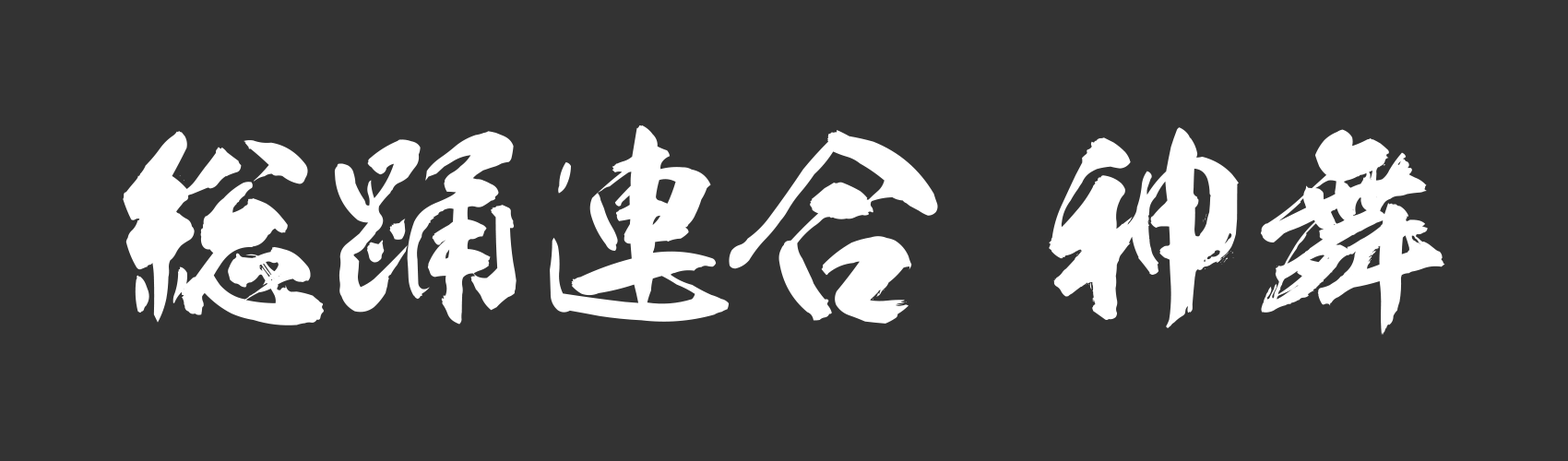
<style>
.page{position:relative;width:1568px;height:461px;background:#333333}
.page>*{position:absolute;margin:0}
.t1{font:205.6px "DRAGON";color:#ffffff}
</style>
<div class="page">
<p class="t1" style="left:123px;top:125px;width:1322px;height:211px">総踊連合 神舞</p>
</div>
